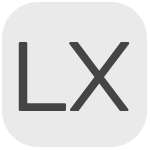
<style>
.page{position:relative;width:150px;height:150px;background:#eaeaea}
.page>*{position:absolute;margin:0}
.t1{font:94.5px "Raleway";color:#454545;font-weight:bold}
</style>
<div class="page">
<p class="t1" style="left:18px;top:42px;width:112px;height:69px">LX</p>
</div>
